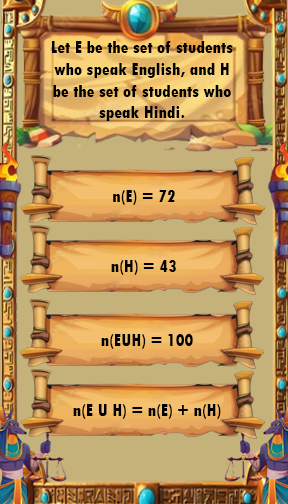
<style>
.page{position:relative;width:288px;height:504px;background:#c4b27a}
.page>*{position:absolute;margin:0}
.t1{font:18px "TwCenMT-CondensedExtraBold";color:#000000}
.t2{font:18px "TimesNewRomanPSMT";color:#000000}
</style>
<div class="page">
<p class="t1" style="left:52px;top:41px;width:181px;height:80px;text-align:center">Let E be the set of students who speak English, and H be the set of students who speak Hindi.</p>
<p class="t1" style="left:113px;top:190px;width:62px;height:15px">n(E) = 72</p>
<p class="t1" style="left:111px;top:260px;width:65px;height:15px">n(H) = 43</p>
<p class="t1" style="left:101px;top:334px;width:92px;height:15px">n(EUH) = 100</p>
<p class="t1" style="left:73px;top:404px;width:148px;height:15px">n(E U H) = n(E) + n(H) – n(E <span class="t2">∩</span> H) …(1)</p>
</div>
